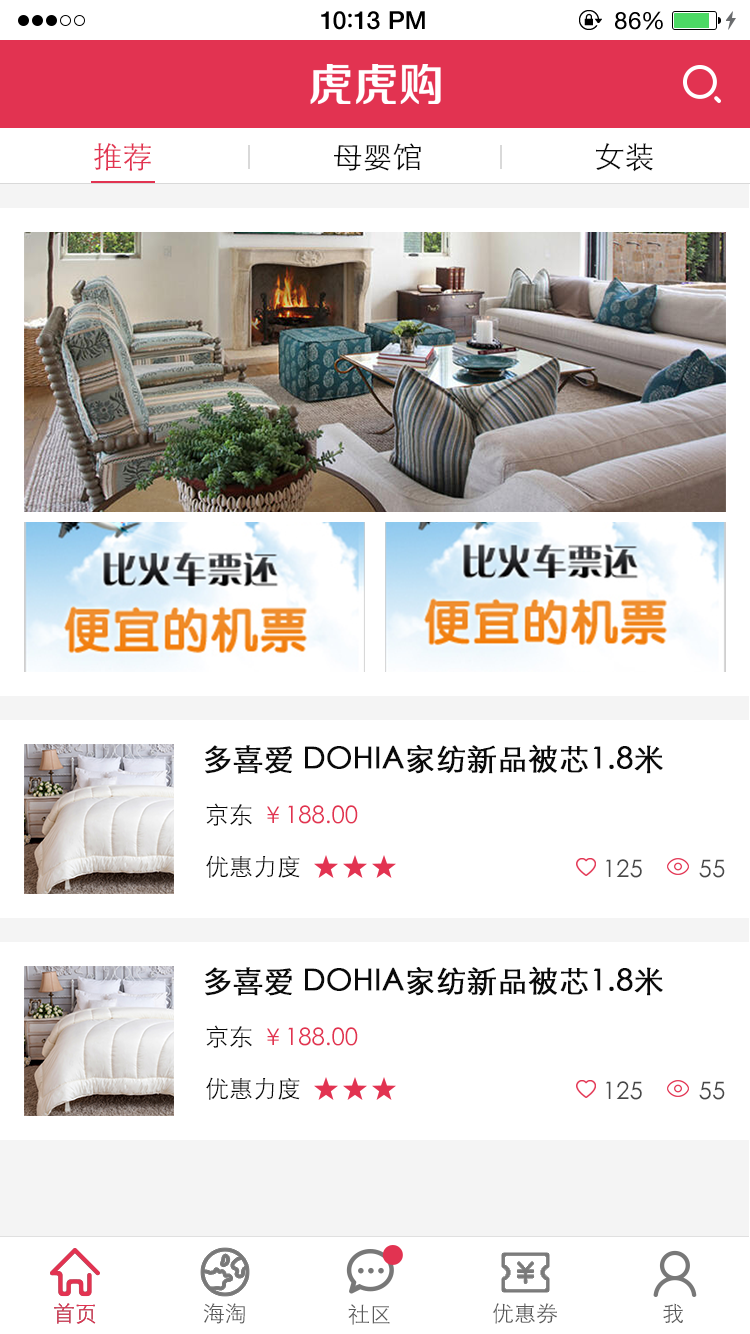
<style>
.page{position:relative;width:750px;height:1334px;background:#ffffff}
.page>*{position:absolute;margin:0}
.t1{font:25px "HelveticaNeue-Medium";letter-spacing:0.015em;color:#000000}
.t2{font:25px "ArialRoundedMTBold";letter-spacing:0.015em;color:#000000}
.t3{font:24px "HelveticaNeue";letter-spacing:0.03em;color:#000000}
.t4{font:30px "STXihei";color:#e23351}
.t5{font:30px "STXihei";color:#0a0a0a}
.t6{font:30px "STXihei";color:#0a0a0a;font-weight:bold}
.t7{font:24px "STXihei";color:#0a0a0a}
.t8{font:24px "STXihei";color:#e23351}
.t9{font:24px "STXihei";color:#484848}
.t10{font:21.9px "STXihei";color:#e23351}
.t11{font:21.9px "STXihei";color:#5a5a5a}
</style>
<div class="page">
<p class="t1" style="left:321px;top:11px;width:104px;height:19px">10<span class="t2">:</span>13 PM</p>
<p class="t3" style="left:615px;top:11px;width:48px;height:19px">86%</p>
<p class="t4" style="left:94px;top:143px;width:57px;height:28px">推荐</p>
<p class="t5" style="left:334px;top:143px;width:87px;height:28px">母婴馆</p>
<p class="t5" style="left:596px;top:143px;width:57px;height:29px">女装</p>
<p class="t6" style="left:205px;top:744px;width:458px;height:30px">多喜爱 DOHIA家纺新品被芯1.8米</p>
<p class="t7" style="left:206px;top:803px;width:46px;height:23px">京东</p>
<p class="t8" style="left:267px;top:805px;width:91px;height:19px">￥188.00</p>
<p class="t7" style="left:206px;top:855px;width:94px;height:23px">优惠力度</p>
<p class="t9" style="left:606px;top:859px;width:36px;height:19px">125</p>
<p class="t9" style="left:699px;top:859px;width:26px;height:19px">55</p>
<p class="t6" style="left:205px;top:966px;width:458px;height:30px">多喜爱 DOHIA家纺新品被芯1.8米</p>
<p class="t7" style="left:206px;top:1025px;width:46px;height:23px">京东</p>
<p class="t8" style="left:267px;top:1027px;width:91px;height:19px">￥188.00</p>
<p class="t7" style="left:206px;top:1077px;width:94px;height:23px">优惠力度</p>
<p class="t9" style="left:606px;top:1081px;width:36px;height:19px">125</p>
<p class="t9" style="left:699px;top:1081px;width:26px;height:19px">55</p>
<p class="t10" style="left:54px;top:1303px;width:42px;height:21px">首页</p>
<p class="t10" style="left:54px;top:1303px;width:42px;height:21px">首页</p>
<p class="t11" style="left:203px;top:1303px;width:42px;height:21px">海淘</p>
<p class="t11" style="left:348px;top:1304px;width:42px;height:21px">社区</p>
<p class="t11" style="left:492px;top:1303px;width:65px;height:21px">优惠券</p>
<p class="t11" style="left:663px;top:1303px;width:20px;height:20px">我</p>
</div>
